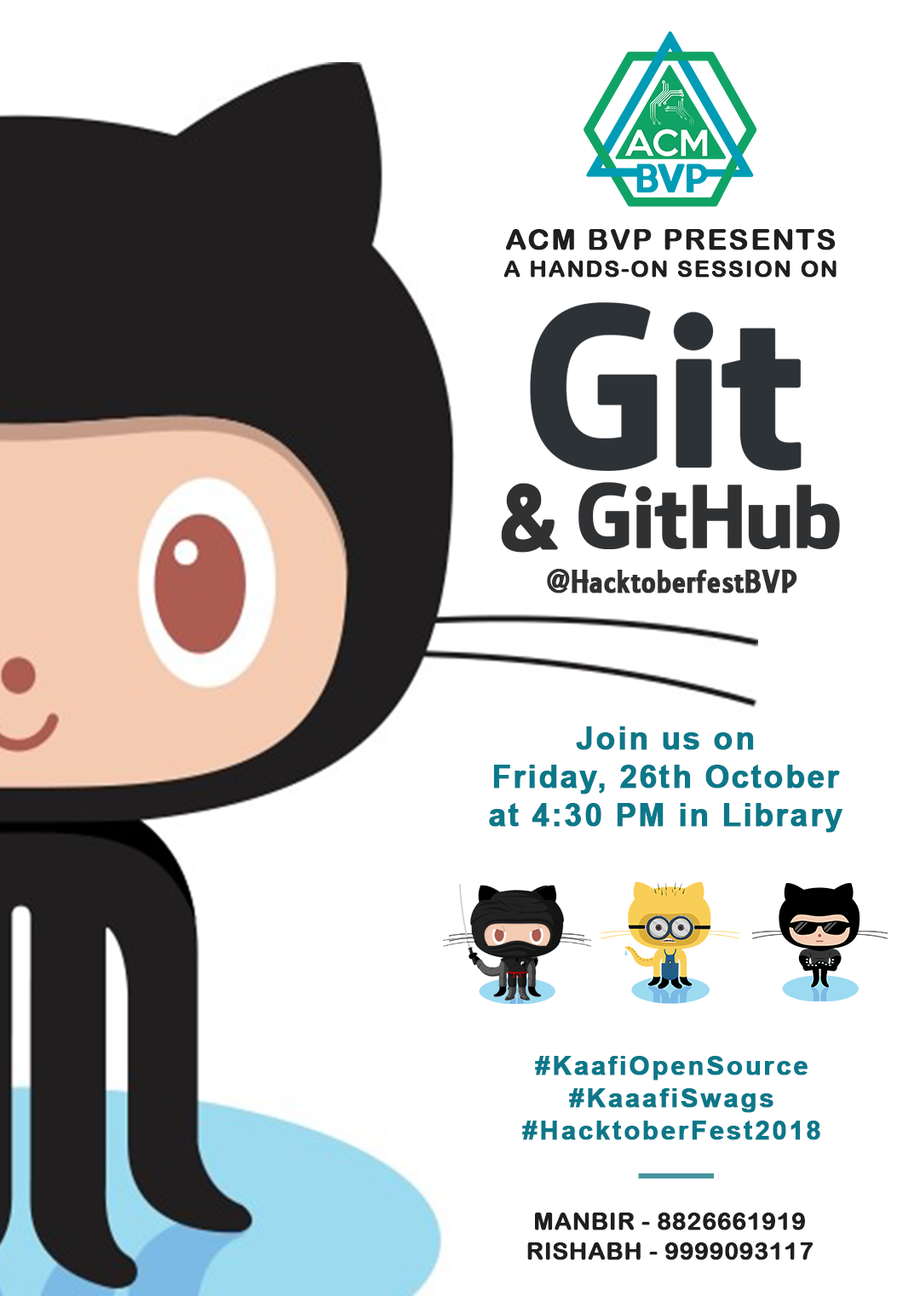
<style>
.page{position:relative;width:920px;height:1296px;background:#ffffff}
.page>*{position:absolute;margin:0}
.t1{font:28.8px "ArialRoundedMTBold";letter-spacing:0.05em;color:#201e1f;font-weight:bold}
.t2{font:22.8px "ArialRoundedMTBold";letter-spacing:0.05em;color:#201e1f;font-weight:bold}
.t3{font:95px "Collegiate";color:#313131;font-weight:bold}
.t4{font:33.7px "Collegiate";color:#313131;font-weight:bold}
.t5{font:31.2px "Arial-BoldMT";letter-spacing:0.05em;color:#0c7889;font-weight:bold}
.t6{font:26.4px "Arial-BoldMT";letter-spacing:0.065em;color:#0c7889;font-weight:bold}
.t7{font:43.3px "Arial-BoldMT";letter-spacing:-0.01em;color:#4a94a1;font-weight:bold}
.t8{font:24px "ArialRoundedMTBold";color:#201e1f;font-weight:bold}
</style>
<div class="page">
<p class="t1" style="left:505px;top:229px;width:331px;height:21px">ACM BVP PRESENTS</p>
<p class="t2" style="left:503px;top:261px;width:333px;height:17px">A HANDS-ON SESSION ON</p>
<p class="t3" style="left:501px;top:483px;width:57px;height:70px">&amp;</p>
<p class="t4" style="left:547px;top:569px;width:250px;height:25px">@HacktoberfestBVP</p>
<p class="t5" style="left:489px;top:727px;width:353px;height:106px;text-align:center">Join us on<br>Friday, 26th October<br>at 4:30 PM in Library</p>
<p class="t6" style="left:522px;top:1056px;width:298px;height:84px;text-align:center">#KaafiOpenSource<br>#KaaafiSwags<br>#HacktoberFest2018</p>
<p class="t7" style="left:638px;top:1174px;width:76px;height:5px">___</p>
<p class="t8" style="left:527px;top:1213px;width:286px;height:48px;text-align:center">MANBIR - 8826661919<br>RISHABH - 9999093117</p>
</div>
